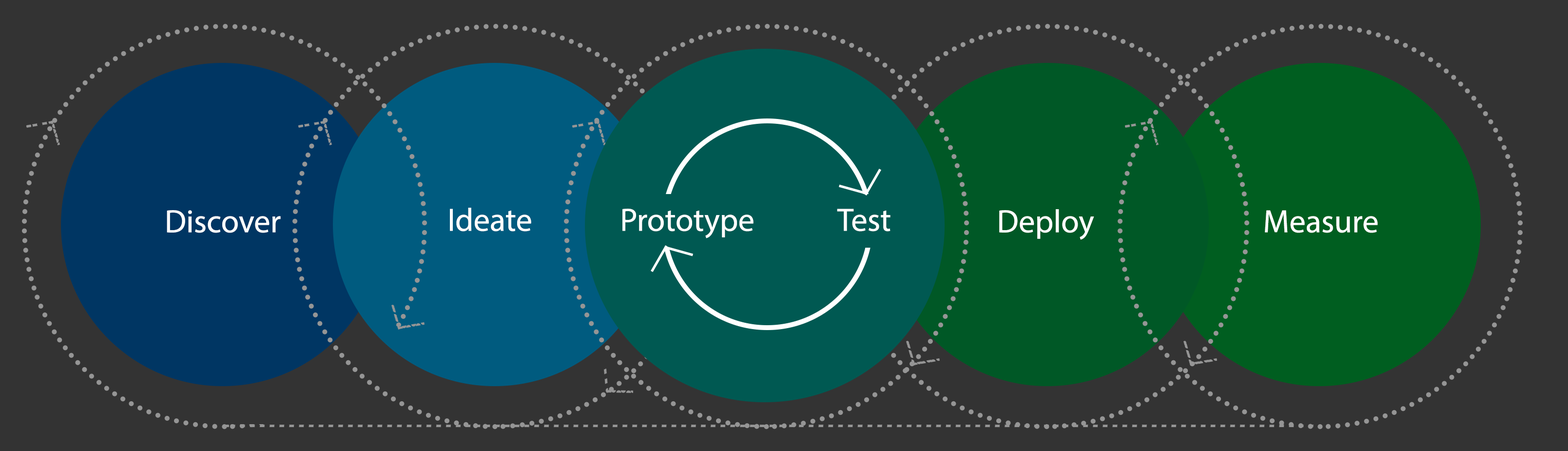
<style>
.page{position:relative;width:1568px;height:451px;background:#333333}
.page>*{position:absolute;margin:0}
.t1{font:32.5px "MyriadPro-Regular";color:#ffffff}
</style>
<div class="page">
<p class="t1" style="left:450px;top:208px;width:81px;height:24px">Ideate</p>
<p class="t1" style="left:622px;top:209px;width:132px;height:29px">Prototype</p>
<p class="t1" style="left:837px;top:209px;width:53px;height:23px">Test</p>
<p class="t1" style="left:999px;top:209px;width:95px;height:31px">Deploy</p>
<p class="t1" style="left:167px;top:210px;width:114px;height:23px">Discover</p>
<p class="t1" style="left:1265px;top:210px;width:113px;height:23px">Measure</p>
</div>
